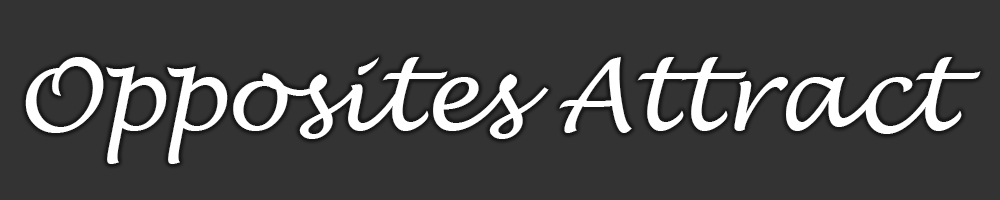
<style>
.page{position:relative;width:1000px;height:200px;background:#333333}
.page>*{position:absolute;margin:0}
.t1{font:100px "LucidaHandwriting-Italic";color:#ffffff}
</style>
<div class="page">
<p class="t1" style="left:25px;top:57px;width:956px;height:107px">Opposites Attract</p>
</div>
